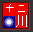
<style>
.page{position:relative;width:33px;height:32px;background:#f20000}
.page>*{position:absolute;margin:0}
.t1{font:10.4px "SimSun";color:#ffffff}
.t2{font:11.7px "SimSun";color:#ffffff}
</style>
<div class="page">
<p class="t1" style="left:6px;top:4px;width:19px;height:8px">十二</p>
<p class="t2" style="left:16px;top:15px;width:11px;height:12px">川</p>
</div>
